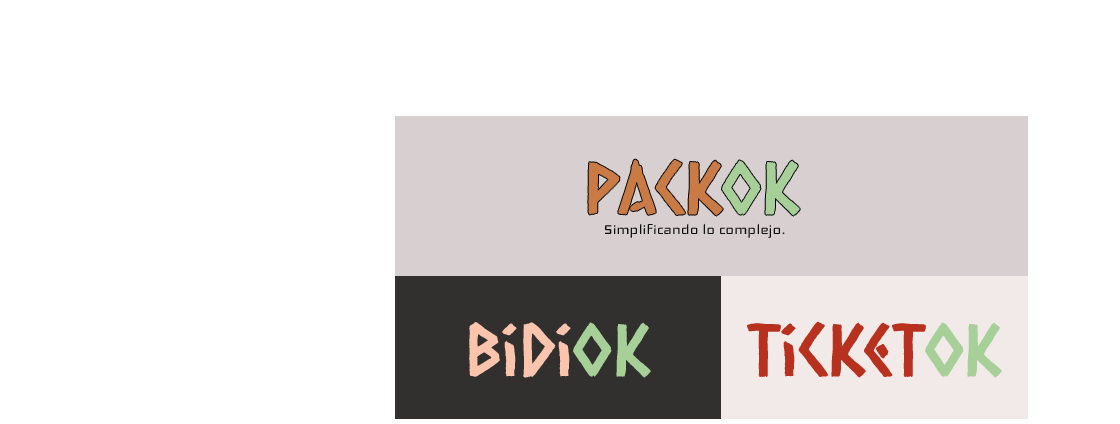
<style>
.page{position:relative;width:1120px;height:424px;background:#ffffff}
.page>*{position:absolute;margin:0}
.t1{font:72px "CaesarDressing";color:#c97a45}
.t2{font:72px "CaesarDressing";color:#a7d099}
.t3{font:18px "Iceland-Regular";color:#0f0f0f}
.t4{font:18px "Iceland-Regular";color:#191818}
.t5{font:72px "CaesarDressing";color:#fac4ad}
.t6{font:72px "CaesarDressing";color:#b8301e}
</style>
<div class="page">
<p class="t1" style="left:588px;top:159px;width:212px;height:57px">Pack<span class="t2">ok</span></p>
<p class="t3" style="left:605px;top:223px;width:180px;height:15px">Simplificando lo complejo<span class="t4">.</span></p>
<p class="t5" style="left:469px;top:322px;width:182px;height:56px">Bidi<span class="t2">ok</span></p>
<p class="t6" style="left:747px;top:321px;width:255px;height:57px">Ticket<span class="t2">ok</span></p>
</div>
